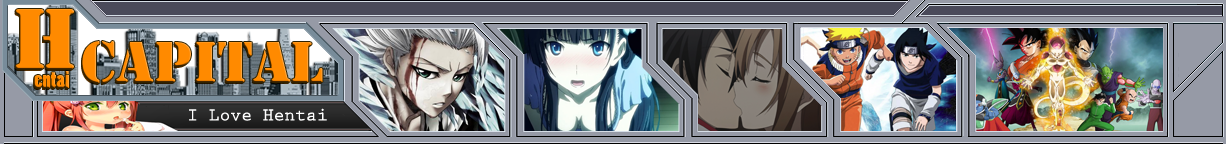
<style>
.page{position:relative;width:1226px;height:144px}
.page>*{position:absolute;margin:0}
.t1{font:80px "StencilStd";color:#ff8a00}
.t2{font:54px "StencilStd";color:#ff8a00}
.t3{font:22px "PoplarStd";color:#ff8a00}
.t4{font:18px "PrestigeEliteStd-Bd";color:#ffffff}
</style>
<div class="page">
<p class="t1" style="left:15px;top:9px;width:59px;height:60px">H</p>
<p class="t2" style="left:82px;top:41px;width:241px;height:42px">capital</p>
<p class="t3" style="left:34px;top:71px;width:35px;height:17px">entai</p>
<p class="t4" style="left:189px;top:108px;width:138px;height:13px">I Love Hentai</p>
</div>
